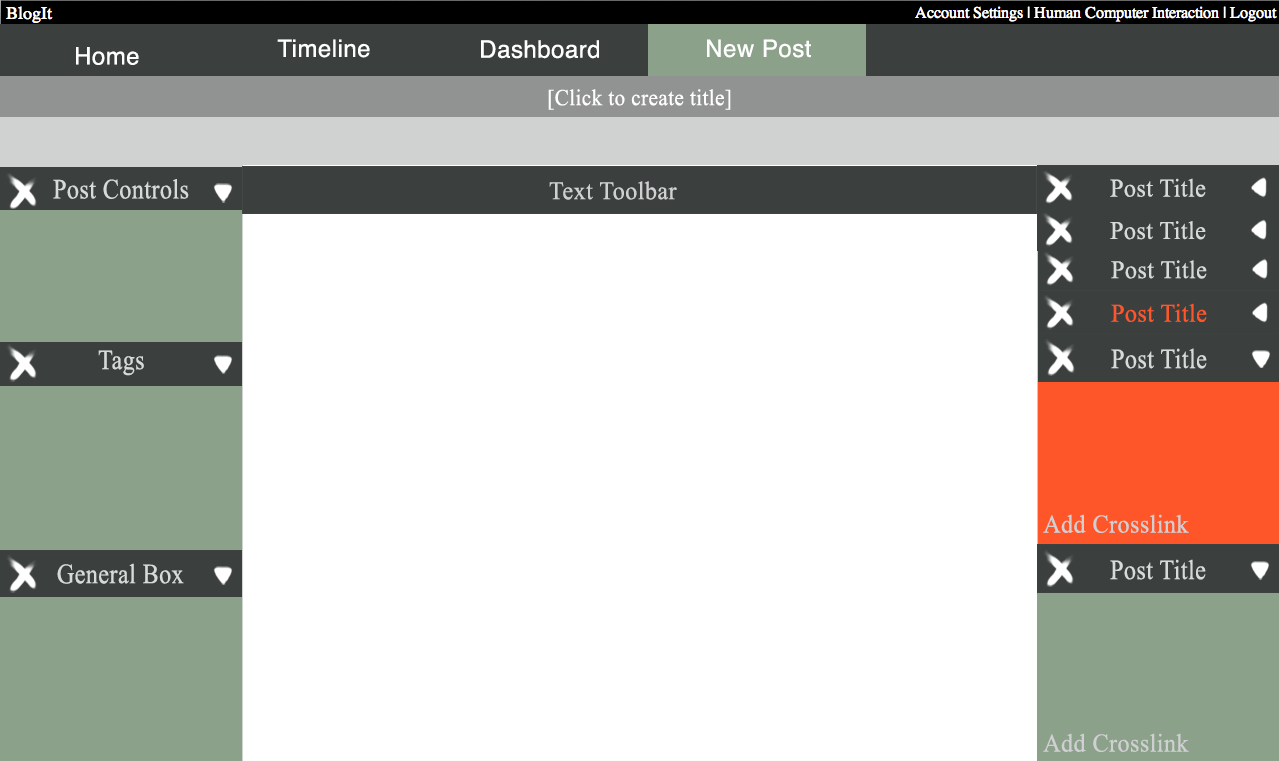
<style>
.page{position:relative;width:1279px;height:761px;background:#ffffff}
.page>*{position:absolute;margin:0}
.t1{font:24px "Helvetica";letter-spacing:0.02em;color:#ffffff}
.t2{font:22.7px "TimesNewRomanPSMT";letter-spacing:0.02em;color:#ffffff;scale:0.93 1}
.t3{font:27.8px "TimesNewRomanPSMT";letter-spacing:0.02em;color:#d6dad9;scale:0.86 1}
.t4{font:25.5px "TimesNewRomanPSMT";letter-spacing:0.02em;color:#cfd0d1;scale:0.94 1}
.t5{font:25.5px "TimesNewRomanPSMT";letter-spacing:0.02em;color:#d6dad9;scale:0.94 1}
.t6{font:25.5px "TimesNewRomanPSMT";letter-spacing:0.02em;color:#ff5629;scale:0.94 1}
</style>
<div class="page">
<p class="t1" style="left:277px;top:39px;width:93px;height:19px">Timeline</p>
<p class="t1" style="left:481px;top:40px;width:118px;height:19px">Dashboard</p>
<p class="t1" style="left:707px;top:39px;width:104px;height:19px">New Post</p>
<p class="t1" style="left:76px;top:47px;width:63px;height:18px">Home</p>
<p class="t2" style="left:548px;top:89px;width:183px;height:21px">[Click to create title]</p>
<p class="t3" style="left:53px;top:179px;width:136px;height:20px">Post Controls</p>
<p class="t4" style="left:549px;top:181px;width:128px;height:19px">Text Toolbar</p>
<p class="t5" style="left:1110px;top:178px;width:96px;height:19px">Post Title</p>
<p class="t5" style="left:1110px;top:221px;width:96px;height:19px">Post Title</p>
<p class="t5" style="left:1111px;top:260px;width:96px;height:19px">Post Title</p>
<p class="t6" style="left:1111px;top:303px;width:96px;height:19px">Post Title</p>
<p class="t3" style="left:98px;top:350px;width:46px;height:26px">Tags</p>
<p class="t3" style="left:1111px;top:348px;width:96px;height:21px">Post Title</p>
<p class="t4" style="left:1043px;top:514px;width:146px;height:19px">Add Crosslink</p>
<p class="t3" style="left:57px;top:563px;width:127px;height:21px">General Box</p>
<p class="t3" style="left:1110px;top:559px;width:96px;height:21px">Post Title</p>
<p class="t4" style="left:1043px;top:733px;width:146px;height:19px">Add Crosslink</p>
</div>
